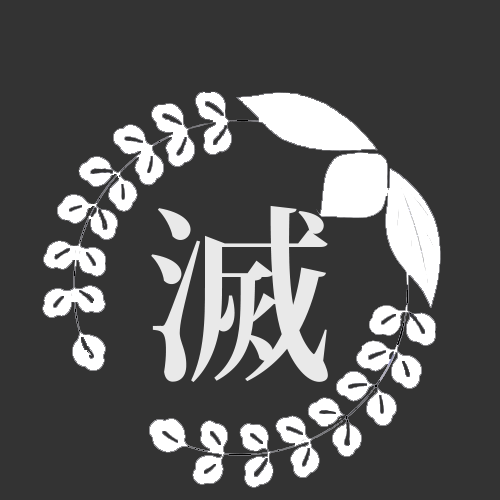
<style>
.page{position:relative;width:500px;height:500px;background:#333333}
.page>*{position:absolute;margin:0}
.t1{font:186.6px "KozMinPro-Bold";color:#e9e9e9}
</style>
<div class="page">
<p class="t1" style="left:151px;top:205px;width:177px;height:178px">滅</p>
</div>
